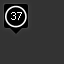
<style>
.page{position:relative;width:64px;height:64px;background:#333333}
.page>*{position:absolute;margin:0}
.t1{font:11px "Tahoma";color:#ffffff;text-transform:uppercase}
</style>
<div class="page">
<p class="t1" style="left:11px;top:12px;width:11px;height:8px">37</p>
</div>
